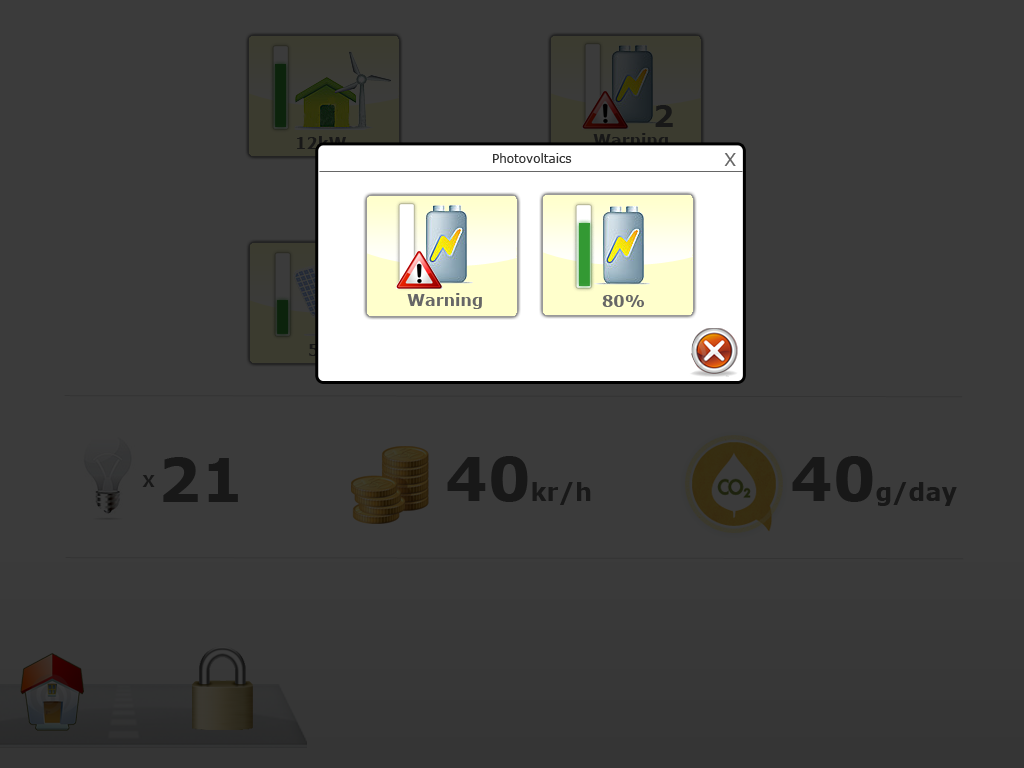
<style>
.page{position:relative;width:1024px;height:768px;background:#3b3b3b}
.page>*{position:absolute;margin:0}
.t1{font:30px "Verdana-Bold";color:#181818}
.t2{font:16px "Verdana-Bold"}
.t3{font:12px "Verdana";color:#333333}
.t4{font:18px "Verdana";color:#666666}
.t5{font:16px "Verdana-Bold";color:#666666}
.t6{font:60px "Verdana-Bold";color:#181818}
.t7{font:24px "Verdana-Bold";color:#181818}
.t8{font:16px "Verdana-Bold";color:#181818}
</style>
<div class="page">
<p class="t1" style="left:655px;top:105px;width:18px;height:22px">2</p>
<p class="t2" style="left:593px;top:133px;width:75px;height:16px">Warning</p>
<p class="t3" style="left:493px;top:153px;width:79px;height:10px">Photovoltaics</p>
<p class="t4" style="left:724px;top:153px;width:12px;height:13px">X</p>
<p class="t5" style="left:407px;top:293px;width:75px;height:16px">Warning</p>
<p class="t5" style="left:602px;top:295px;width:42px;height:12px">80%</p>
<p class="t6" style="left:163px;top:457px;width:75px;height:45px">21</p>
<p class="t7" style="left:447px;top:456px;width:144px;height:49px"><span class="t6">40</span>kr/h</p>
<p class="t7" style="left:792px;top:456px;width:165px;height:50px"><span class="t6">40</span>g/day</p>
<p class="t8" style="left:142px;top:475px;width:13px;height:12px">X</p>
</div>
